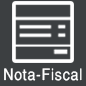
<style>
.page{position:relative;width:86px;height:86px;background:#3c3f41}
.page>*{position:absolute;margin:0}
.t1{font:15.6px "Helvetica-Normal";letter-spacing:0.06em;color:#ffffff;scale:0.89 1}
</style>
<div class="page">
<p class="t1" style="left:4px;top:68px;width:78px;height:13px">Nota-Fiscal</p>
</div>
